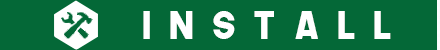
<style>
.page{position:relative;width:440px;height:50px;background:#046837}
.page>*{position:absolute;margin:0}
.t1{font:37.5px "TheNextFont";letter-spacing:0.48em;color:#ffffff}
</style>
<div class="page">
<p class="t1" style="left:143px;top:11px;width:248px;height:28px">INSTALL</p>
</div>
